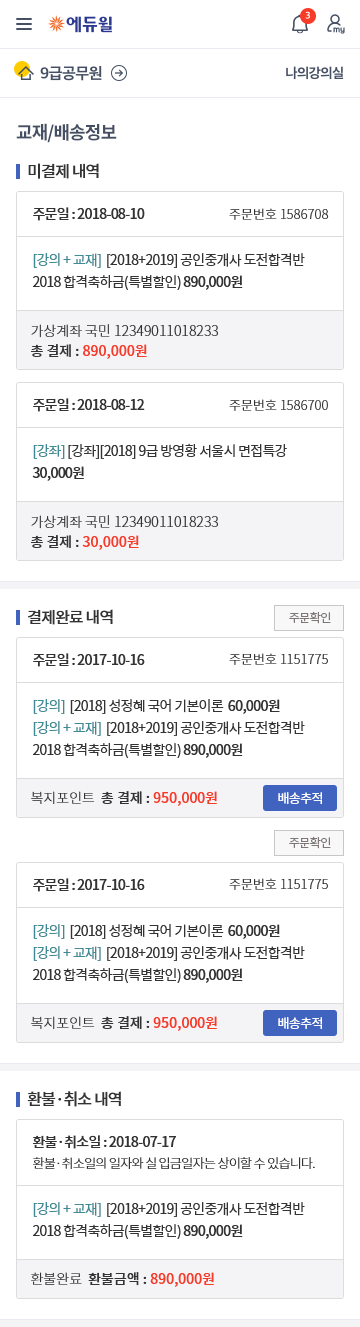
<style>
.page{position:relative;width:360px;height:1327px;background:#ffffff}
.page>*{position:absolute;margin:0}
.t1{font:18px "NotoSansCJKkr-Bold";letter-spacing:-0.05em;color:#454f63}
.t2{font:16px "NotoSansCJKkr-Medium";letter-spacing:-0.05em;color:#333333}
.t3{font:14px "NotoSansCJKkr-Medium";letter-spacing:-0.05em;color:#333333}
.t4{font:13px "NotoSansCJKkr-Light";color:#333333}
.t5{font:14px/22px "NotoSansCJKkr-Regular";letter-spacing:-0.05em;color:#333333}
.t6{font:14px/22px "NotoSansCJKkr-Regular";letter-spacing:-0.05em;color:#3f8b95}
.t7{font:14px/22px "NotoSansCJKkr-Medium";letter-spacing:-0.05em;color:#333333}
.t8{font:14px/20px "NotoSansCJKkr-Light";color:#333333}
.t9{font:14px/20px "NotoSansCJKkr-Medium";color:#333333}
.t10{font:14px/20px "NotoSansCJKkr-Medium";color:#f63b28}
.t11{font:12px "NotoSansCJKkr-DemiLight";letter-spacing:-0.05em;color:#7d7877}
.t12{font:14px "NotoSansCJKkr-Medium";color:#f63b28}
.t13{font:14px "NotoSansCJKkr-Light";color:#333333}
.t14{font:14px "NotoSansCJKkr-Medium";color:#333333}
.t15{font:13px "NotoSansCJKkr-Regular";letter-spacing:-0.05em;color:#ffffff}
.t16{font:13px "NotoSansCJKkr-Light";letter-spacing:-0.05em;color:#333333}
</style>
<div class="page">
<p class="t1" style="left:16px;top:123px;width:101px;height:20px">교재/배송정보</p>
<p class="t2" style="left:28px;top:163px;width:71px;height:16px">미결제 내역</p>
<p class="t3" style="left:33px;top:207px;width:112px;height:14px">주문일 : 2018-08-10</p>
<p class="t4" style="left:229px;top:208px;width:100px;height:12px">주문번호 1586708</p>
<p class="t5" style="left:33px;top:253px;width:272px;height:37px"><span class="t6">[강의 + 교재]  </span>[2018+2019] 공인중개사 도전합격반<br>2018 합격축하금(특별할인) <span class="t7">890,000원</span></p>
<p class="t8" style="left:31px;top:324px;width:188px;height:35px">가상계좌 국민 12349011018233  <br><span class="t9">총 결제 : </span><span class="t10">890,000원</span></p>
<p class="t3" style="left:33px;top:398px;width:112px;height:14px">주문일 : 2018-08-12</p>
<p class="t4" style="left:229px;top:399px;width:99px;height:12px">주문번호 1586700</p>
<p class="t5" style="left:32px;top:443px;width:255px;height:38px"><span class="t6">[강좌] </span>[강좌][2018] 9급 방영황 서울시 면접특강<br><span class="t7">30,000원</span></p>
<p class="t8" style="left:31px;top:515px;width:188px;height:35px">가상계좌 국민 12349011018233  <br><span class="t9">총 결제 : </span><span class="t10">30,000원</span></p>
<p class="t2" style="left:28px;top:609px;width:85px;height:16px">결제완료 내역</p>
<p class="t11" style="left:289px;top:611px;width:42px;height:13px">주문확인</p>
<p class="t3" style="left:33px;top:653px;width:112px;height:14px">주문일 : 2017-10-16</p>
<p class="t4" style="left:229px;top:653px;width:99px;height:12px">주문번호 1151775</p>
<p class="t5" style="left:33px;top:699px;width:272px;height:59px"><span class="t6">[강의]  </span>[2018] 성정혜 국어 기본이론  <span class="t7">60,000원<br></span><span class="t6">[강의 + 교재]  </span>[2018+2019] 공인중개사 도전합격반<br>2018 합격축하금(특별할인) <span class="t7">890,000원</span></p>
<p class="t12" style="left:31px;top:791px;width:186px;height:15px"><span class="t13">복지포인트  </span><span class="t14">총 결제 : </span>950,000원</p>
<p class="t15" style="left:278px;top:792px;width:44px;height:12px">배송추적</p>
<p class="t11" style="left:289px;top:836px;width:42px;height:13px">주문확인</p>
<p class="t3" style="left:33px;top:878px;width:112px;height:14px">주문일 : 2017-10-16</p>
<p class="t4" style="left:229px;top:878px;width:99px;height:12px">주문번호 1151775</p>
<p class="t5" style="left:33px;top:924px;width:272px;height:59px"><span class="t6">[강의]  </span>[2018] 성정혜 국어 기본이론  <span class="t7">60,000원<br></span><span class="t6">[강의 + 교재]  </span>[2018+2019] 공인중개사 도전합격반<br>2018 합격축하금(특별할인) <span class="t7">890,000원</span></p>
<p class="t12" style="left:31px;top:1016px;width:186px;height:15px"><span class="t13">복지포인트  </span><span class="t14">총 결제 : </span>950,000원</p>
<p class="t15" style="left:278px;top:1017px;width:44px;height:12px">배송추적</p>
<p class="t2" style="left:27px;top:1091px;width:94px;height:16px">환불·취소 내역</p>
<p class="t3" style="left:33px;top:1135px;width:143px;height:14px">환불·취소일 : 2018-07-17</p>
<p class="t16" style="left:33px;top:1157px;width:282px;height:12px">환불·취소일의 일자와 실 입금일자는 상이할 수 있습니다.</p>
<p class="t5" style="left:33px;top:1202px;width:272px;height:37px"><span class="t6">[강의 + 교재]  </span>[2018+2019] 공인중개사 도전합격반<br>2018 합격축하금(특별할인) <span class="t7">890,000원</span></p>
<p class="t12" style="left:31px;top:1272px;width:183px;height:15px"><span class="t13">환불완료  </span><span class="t14">환불금액 : </span>890,000원</p>
</div>
